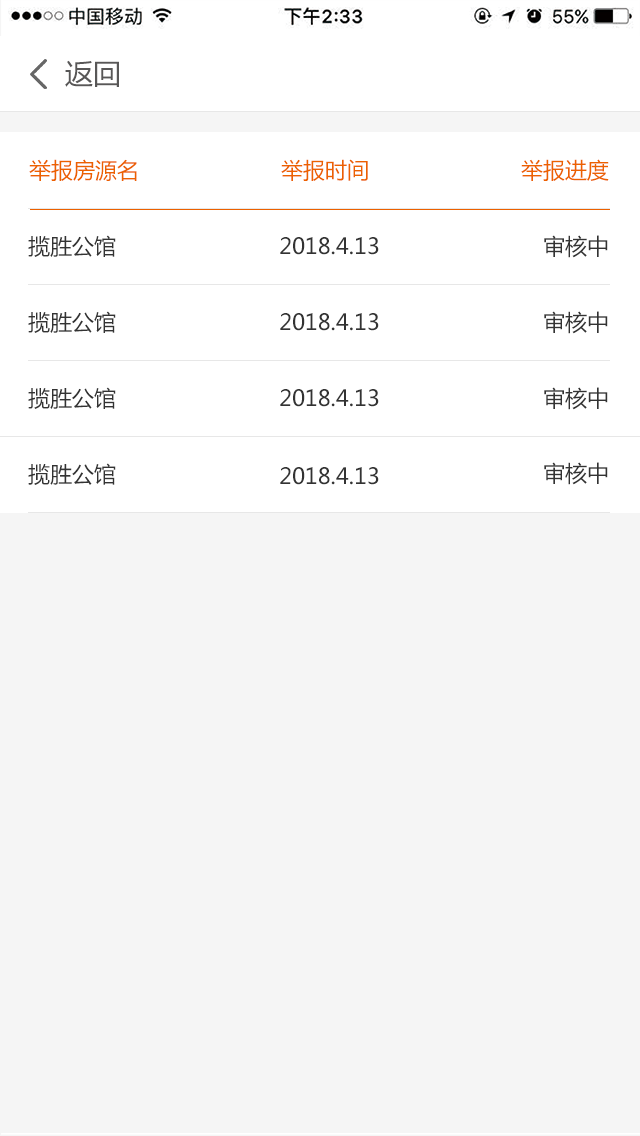
<style>
.page{position:relative;width:640px;height:1136px;background:#f5f5f5}
.page>*{position:absolute;margin:0}
.t1{font:28px "MicrosoftYaHei";color:#585757}
.t2{font:22px "MicrosoftYaHei";color:#ec6100}
.t3{font:22px "MicrosoftYaHei";color:#333333}
</style>
<div class="page">
<p class="t1" style="left:65px;top:60px;width:54px;height:27px">返回</p>
<p class="t2" style="left:29px;top:159px;width:108px;height:22px">举报房源名</p>
<p class="t2" style="left:281px;top:159px;width:87px;height:22px">举报时间</p>
<p class="t2" style="left:521px;top:159px;width:88px;height:22px">举报进度</p>
<p class="t3" style="left:28px;top:235px;width:88px;height:22px">揽胜公馆</p>
<p class="t3" style="left:280px;top:237px;width:99px;height:18px">2018.4.13</p>
<p class="t3" style="left:544px;top:235px;width:64px;height:23px">审核中</p>
<p class="t3" style="left:28px;top:311px;width:88px;height:22px">揽胜公馆</p>
<p class="t3" style="left:280px;top:313px;width:99px;height:18px">2018.4.13</p>
<p class="t3" style="left:544px;top:311px;width:64px;height:23px">审核中</p>
<p class="t3" style="left:28px;top:387px;width:88px;height:22px">揽胜公馆</p>
<p class="t3" style="left:280px;top:389px;width:99px;height:18px">2018.4.13</p>
<p class="t3" style="left:544px;top:387px;width:64px;height:23px">审核中</p>
<p class="t3" style="left:544px;top:462px;width:64px;height:23px">审核中</p>
<p class="t3" style="left:28px;top:463px;width:88px;height:22px">揽胜公馆</p>
<p class="t3" style="left:280px;top:467px;width:99px;height:18px">2018.4.13</p>
</div>
